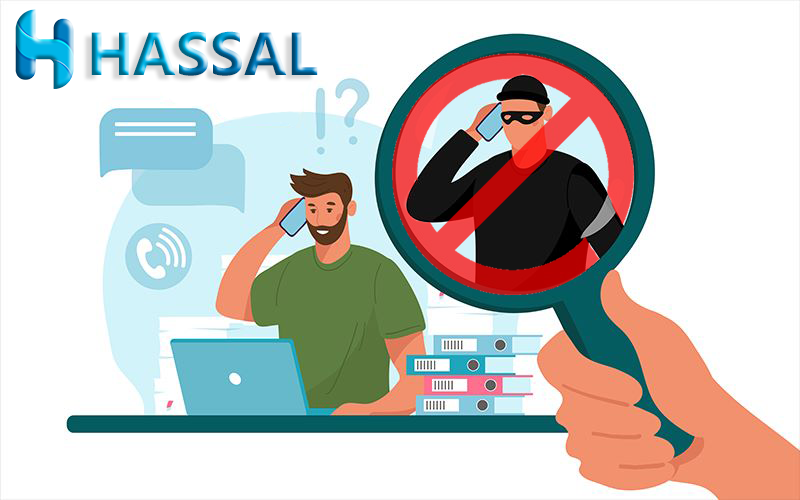
<style>
.page{position:relative;width:800px;height:500px;background:#ffffff}
.page>*{position:absolute;margin:0}
.t1{font:60.8px "MicrosoftPhagsPa-Bold"}
</style>
<div class="page">
<p class="t1" style="left:91px;top:31px;width:227px;height:45px">HASSAL</p>
</div>
